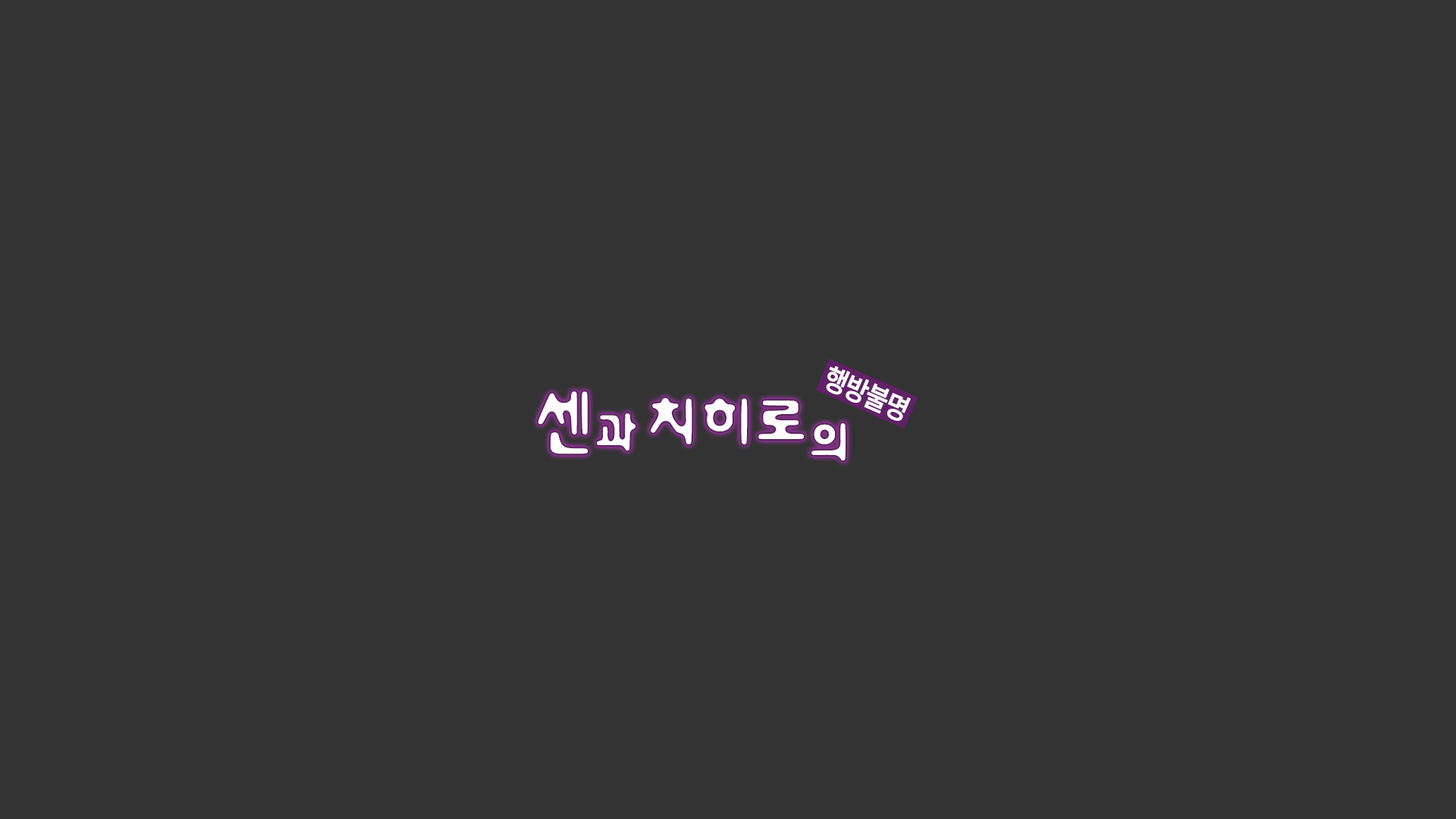
<style>
.page{position:relative;width:1456px;height:819px;background:#333333}
.page>*{position:absolute;margin:0}
.t1{font:28.6px "NotoSansKR-Medium";letter-spacing:-0.08em;color:#fffefe;font-weight:bold;scale:0.89 1}
.t2{font:72.9px "YDIGurmL";letter-spacing:-0.08em;color:#fffefe;font-weight:bold}
.t3{font:68px "YDIGurmL";letter-spacing:-0.08em;color:#fffefe;font-weight:bold}
.t4{font:54.9px "YDIGurmL";letter-spacing:-0.08em;color:#fffefe;font-weight:bold}
</style>
<div class="page">
<p class="t1" style="left:826px;top:366px;width:85px;height:55px;rotate:24deg">행방불명</p>
<p class="t2" style="left:538px;top:391px;width:50px;height:63px">센</p>
<p class="t3" style="left:651px;top:398px;width:153px;height:46px">치히로</p>
<p class="t4" style="left:597px;top:413px;width:38px;height:38px">과</p>
<p class="t4" style="left:811px;top:423px;width:35px;height:38px">의</p>
</div>
